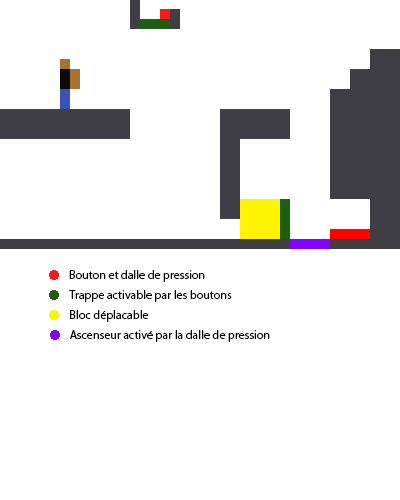
<style>
.page{position:relative;width:400px;height:500px;background:#ffffff}
.page>*{position:absolute;margin:0}
.t1{font:12px "MyriadPro-Regular";color:#010101}
.t2{font:12px "MyriadPro-Regular";color:#000000}
</style>
<div class="page">
<p class="t1" style="left:69px;top:270px;width:136px;height:12px">Bouton et dalle de pression</p>
<p class="t2" style="left:69px;top:290px;width:163px;height:12px">Trappe activable par les boutons</p>
<p class="t2" style="left:70px;top:310px;width:79px;height:12px">Bloc déplacable</p>
<p class="t2" style="left:70px;top:330px;width:200px;height:12px">Ascenseur activé par la dalle de pression</p>
</div>
